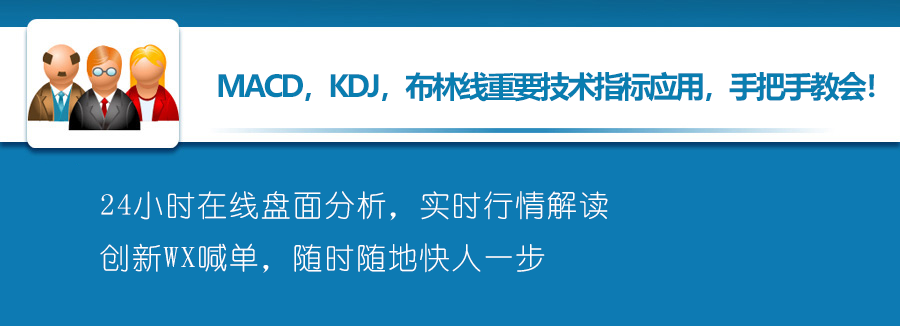
<style>
.page{position:relative;width:900px;height:326px;background:#0d7ab3}
.page>*{position:absolute;margin:0}
.t1{font:30px "MicrosoftYaHei-Bold";letter-spacing:-0.1em;color:#097db0}
.t2{font:30px "YouYuan";letter-spacing:0.06em;color:#ffffff}
</style>
<div class="page">
<p class="t1" style="left:218px;top:71px;width:657px;height:31px">MACD，KDJ，布林线重要技术指标应用，手把手教会！</p>
<p class="t2" style="left:100px;top:191px;width:508px;height:82px">24小时在线盘面分析，实时行情解读<br>创新WX喊单，随时随地快人一步</p>
</div>
